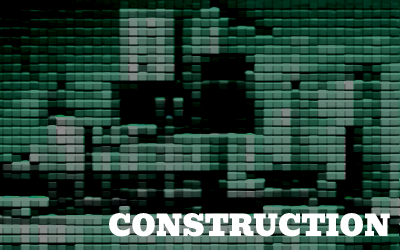
<style>
.page{position:relative;width:400px;height:250px;background:#000000}
.page>*{position:absolute;margin:0}
.t1{font:29px "Bevan-Regular";color:#ffffff}
</style>
<div class="page">
<p class="t1" style="left:109px;top:213px;width:281px;height:24px">CONSTRUCTION</p>
</div>
